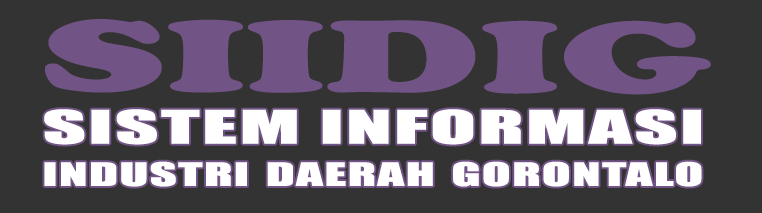
<style>
.page{position:relative;width:762px;height:213px;background:#333333}
.page>*{position:absolute;margin:0}
.t1{font:105.8px "CooperBlack";color:#715386;scale:1.82 1}
.t2{font:42.3px/42.4px "Impact";color:#ffffff;font-variant:small-caps;font-weight:bold;scale:1.78 1}
.t3{font:42.3px/42.4px "Impact";color:#ffffff;font-variant:small-caps;font-weight:bold;scale:1.99 1}
</style>
<div class="page">
<p class="t1" style="left:45px;top:19px;width:666px;height:76px">SIIDIG</p>
<p class="t2" style="left:44px;top:109px;width:658px;height:78px"><span class="t3">SISTEM INFORMASI<br></span>industri daerah gorontalo</p>
</div>
